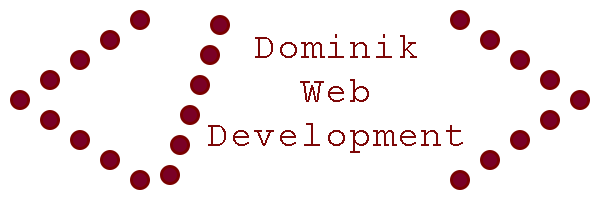
<style>
.page{position:relative;width:600px;height:200px;background:#ffffff}
.page>*{position:absolute;margin:0}
.t1{font:37px "CourierNewPSMT";letter-spacing:0.05em;color:#7d0707}
</style>
<div class="page">
<p class="t1" style="left:208px;top:34px;width:255px;height:119px;text-align:center">Dominik<br>Web<br>Development</p>
</div>
